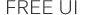
<style>
.page{position:relative;width:95px;height:15px;background:#ffffff}
.page>*{position:absolute;margin:0}
.t1{font:19.2px "Kalinga";color:#333333}
</style>
<div class="page">
<p class="t1" style="left:7px;top:0px;width:70px;height:15px">FREE UI</p>
</div>
